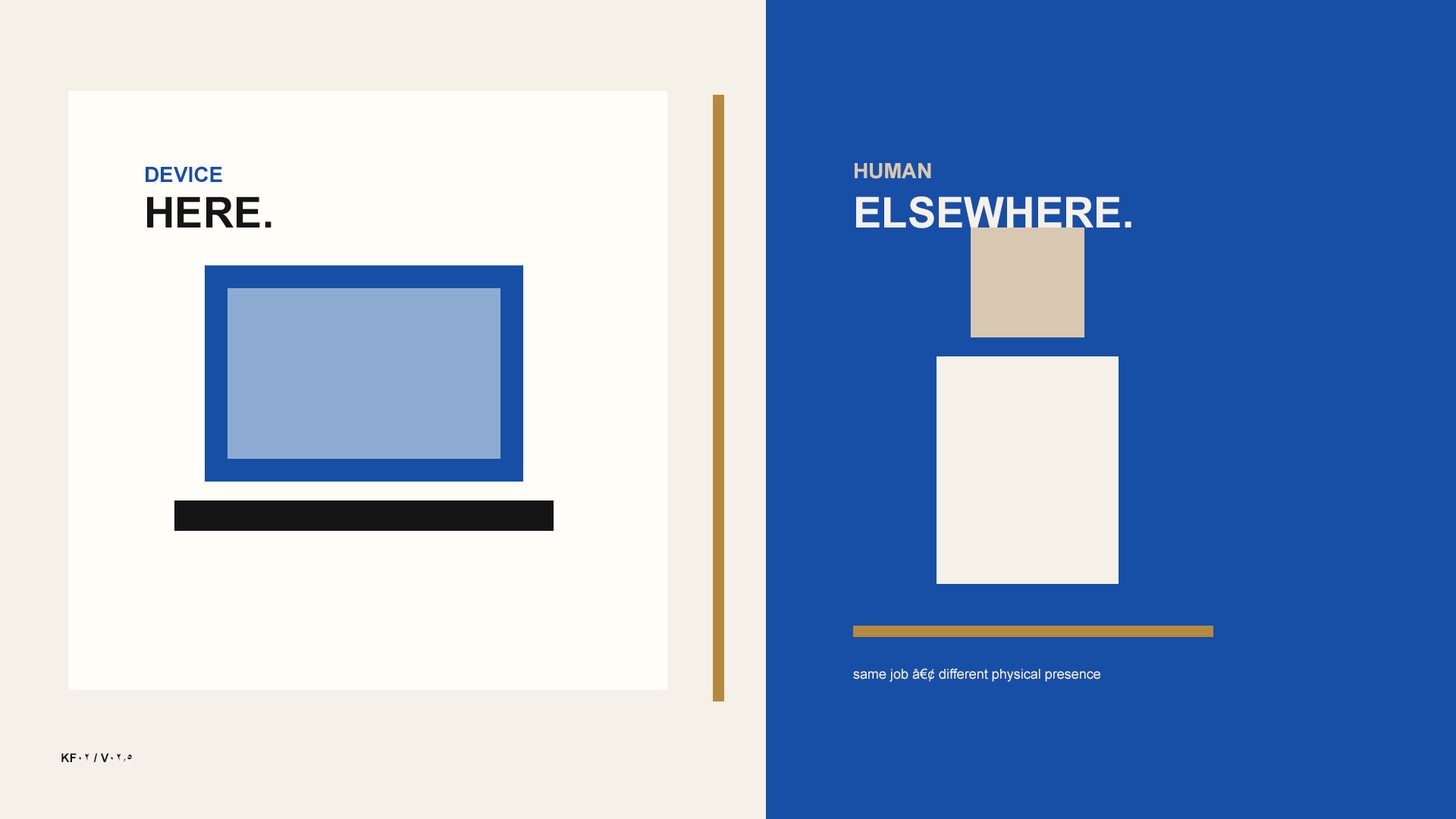
<style>
.page{position:relative;width:1456px;height:819px;background:#174fa6}
.page>*{position:absolute;margin:0}
.t1{font:21.2px "Arial-BoldMT";color:#174fa6}
.t2{font:21.2px "Arial-BoldMT";color:#d9c8b1}
.t3{font:42.5px "Arial-BoldMT";color:#151515}
.t4{font:42.5px "Arial-BoldMT";color:#f6f1e8}
.t5{font:13.6px "ArialMT";color:#f6f1e8}
.t6{font:12.1px "Arial-BoldMT";color:#151515}
</style>
<div class="page">
<p class="t1" style="left:146px;top:166px;width:76px;height:16px">DEVICE</p>
<p class="t2" style="left:855px;top:163px;width:76px;height:16px">HUMAN</p>
<p class="t3" style="left:147px;top:196px;width:124px;height:31px">HERE.</p>
<p class="t4" style="left:856px;top:196px;width:275px;height:32px">ELSEWHERE.</p>
<p class="t5" style="left:853px;top:668px;width:247px;height:14px">same job â€¢ different physical presence</p>
<p class="t6" style="left:61px;top:753px;width:71px;height:9px">KF02 / V02.5</p>
</div>
